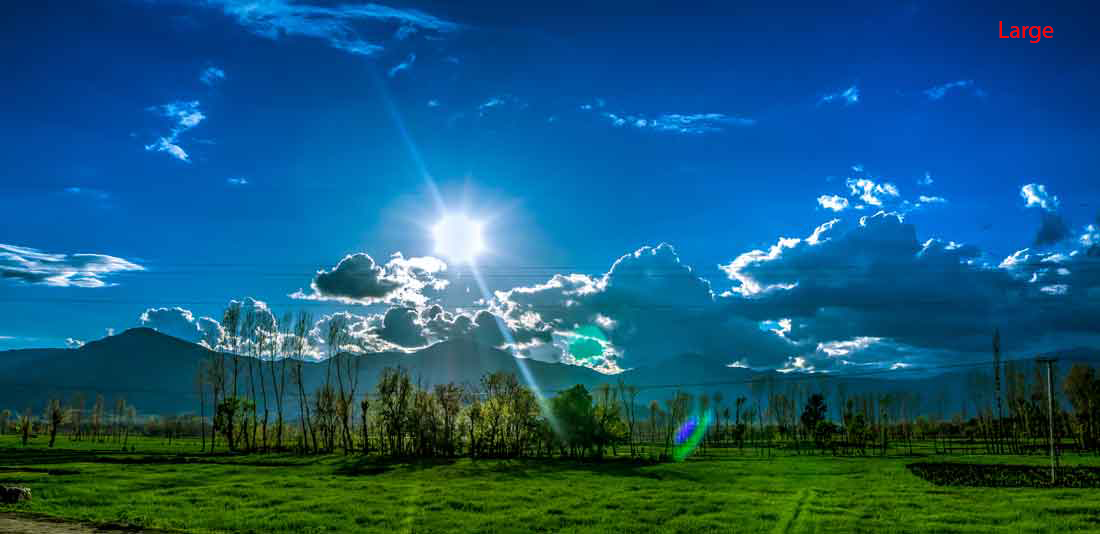
<style>
.page{position:relative;width:1100px;height:534px}
.page>*{position:absolute;margin:0}
.t1{font:24px "MyriadPro-Regular";color:#f70404}
</style>
<div class="page">
<p class="t1" style="left:999px;top:21px;width:55px;height:22px">Large</p>
</div>
